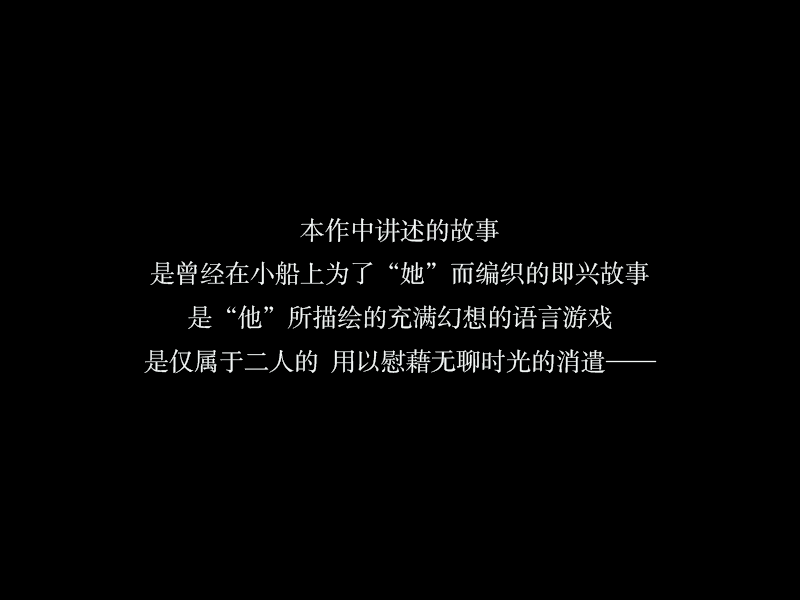
<style>
.page{position:relative;width:800px;height:600px;background:#000000}
.page>*{position:absolute;margin:0}
.t1{font:25px "FZSSJW--GB1-0";color:#f4f8f7}
</style>
<div class="page">
<p class="t1" style="left:144px;top:218px;width:513px;height:156px;text-align:center">本作中讲述的故事<br>是曾经在小船上为了“她”而编织的即兴故事<br>是“他”所描绘的充满幻想的语言游戏<br>是仅属于二人的  用以慰藉无聊时光的消遣——</p>
</div>
